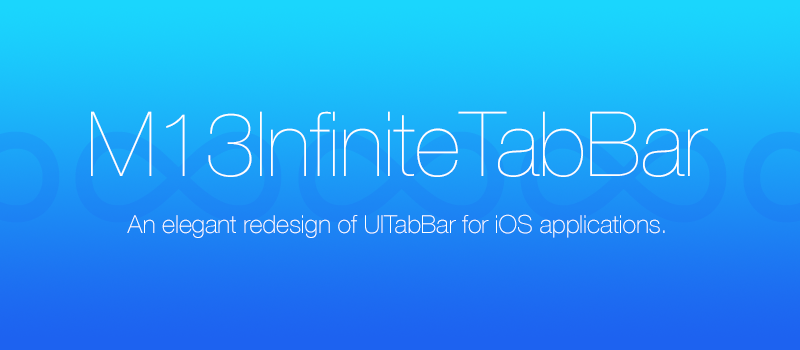
<style>
.page{position:relative;width:800px;height:350px}
.page>*{position:absolute;margin:0}
.t1{font:90px "HelveticaNeue-UltraLight";letter-spacing:-0.007em;color:#ffffff}
.t2{font:25px "HelveticaNeue-Thin";letter-spacing:-0.007em;color:#ffffff}
</style>
<div class="page">
<p class="t1" style="left:91px;top:111px;width:617px;height:66px">M13InfiniteTabBar</p>
<p class="t2" style="left:127px;top:214px;width:538px;height:24px">An elegant redesign of UITabBar for iOS applications.</p>
</div>
